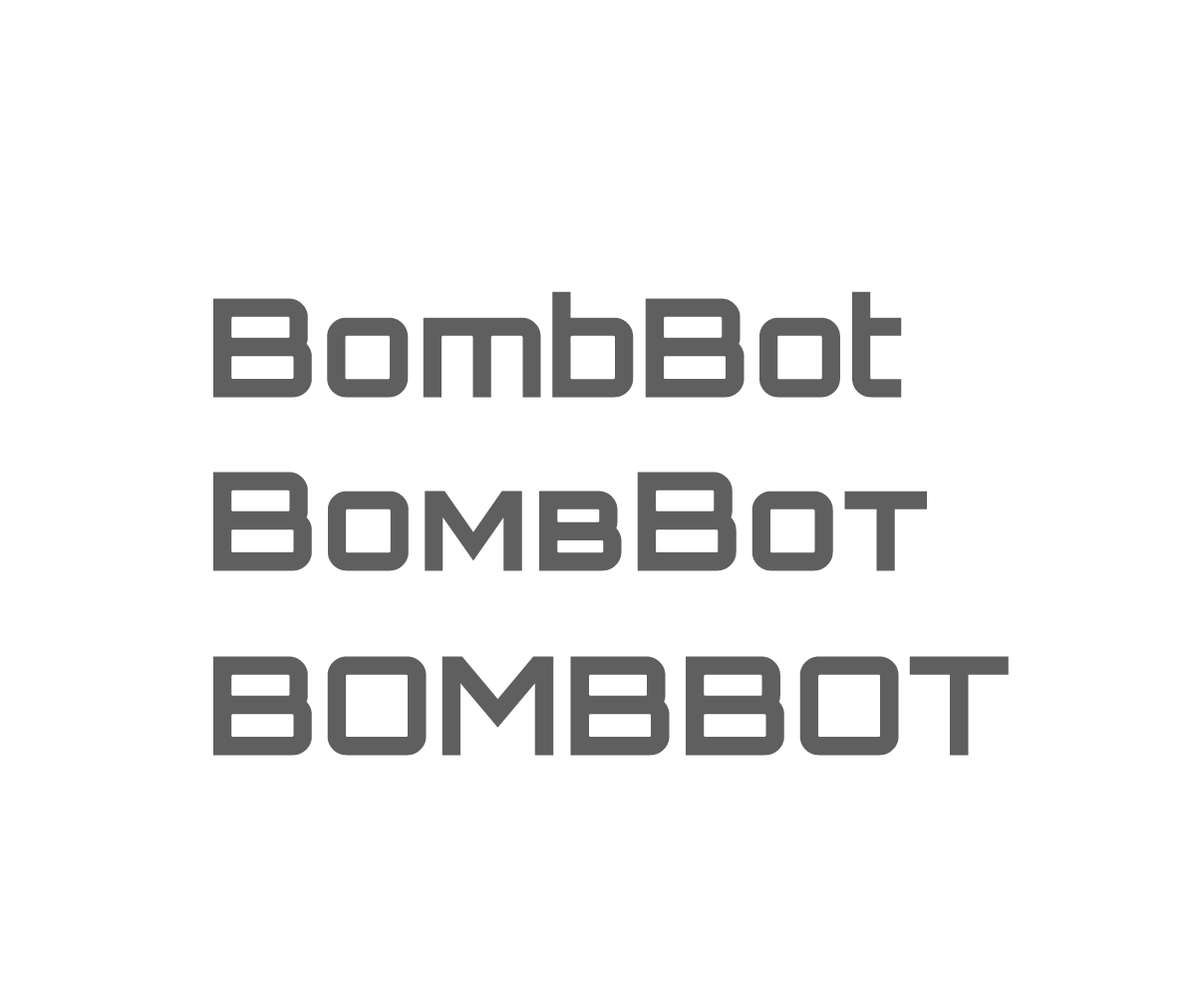
<style>
.page{position:relative;width:1196px;height:997px;background:#ffffff}
.page>*{position:absolute;margin:0}
.t1{font:136.6px "Orbitron-Bold";letter-spacing:0.01em;color:#5f5f5f}
.t2{font:136.6px "Orbitron-Bold";letter-spacing:0.015em;color:#5f5f5f;font-variant:small-caps}
.t3{font:136.6px "Orbitron-Bold";letter-spacing:0.01em;color:#5f5f5f;text-transform:uppercase}
</style>
<div class="page">
<p class="t1" style="left:213px;top:291px;width:689px;height:107px">BombBot</p>
<p class="t2" style="left:213px;top:472px;width:714px;height:99px">BombBot</p>
<p class="t3" style="left:213px;top:656px;width:796px;height:100px">BombBot</p>
</div>
